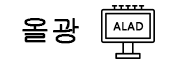
<style>
.page{position:relative;width:180px;height:64px;background:#ffffff}
.page>*{position:absolute;margin:0}
.t1{font:30px "Gulim";color:#000000;font-weight:bold}
.t2{font:10.9px "MalgunGothic";letter-spacing:0.05em;color:#000000;font-weight:bold}
</style>
<div class="page">
<p class="t1" style="left:22px;top:18px;width:57px;height:26px">올광</p>
<p class="t2" style="left:113px;top:22px;width:31px;height:9px">ALAD</p>
</div>
